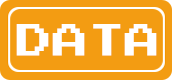
<style>
.page{position:relative;width:172px;height:80px;background:#f39c12}
.page>*{position:absolute;margin:0}
.t1{font:36px "PressStart2P-Regular";color:#ffffff}
</style>
<div class="page">
<p class="t1" style="left:16px;top:24px;width:141px;height:32px">DATA</p>
</div>
